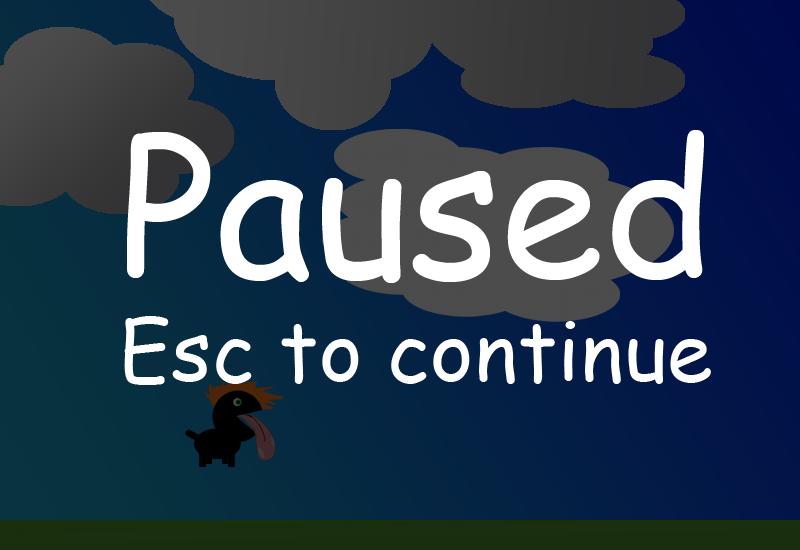
<style>
.page{position:relative;width:800px;height:550px}
.page>*{position:absolute;margin:0}
.t1{font:187.5px "ComicSansMS";color:#ffffff}
.t2{font:83.3px "ComicSansMS";color:#ffffff}
</style>
<div class="page">
<p class="t1" style="left:127px;top:129px;width:577px;height:154px">Paused</p>
<p class="t2" style="left:124px;top:316px;width:587px;height:69px">Esc to continue</p>
</div>
